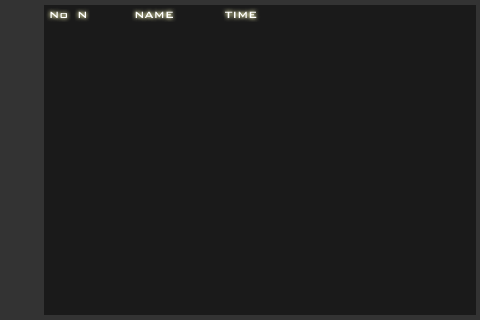
<style>
.page{position:relative;width:480px;height:320px;background:#1a1a1a}
.page>*{position:absolute;margin:0}
.t1{font:12px "BankGothic-Medium";color:#ffffff}
</style>
<div class="page">
<p class="t1" style="left:50px;top:11px;width:207px;height:7px">No  N          NAME           TIME</p>
</div>
